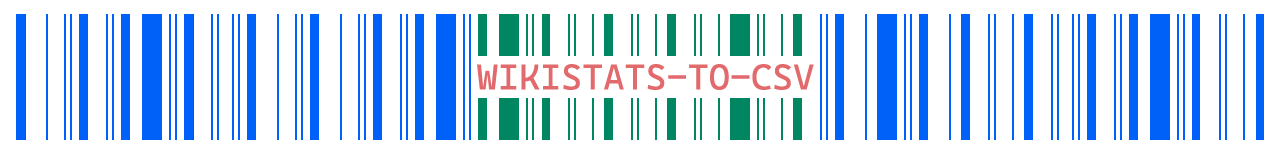
<style>
.page{position:relative;width:1276px;height:155px;background:#ffffff}
.page>*{position:absolute;margin:0}
.t1{font:36px "CascadiaCode-Regular";color:#e2696c}
</style>
<div class="page">
<p class="t1" style="left:477px;top:64px;width:337px;height:26px">WIKISTATS-TO-CSV</p>
</div>
